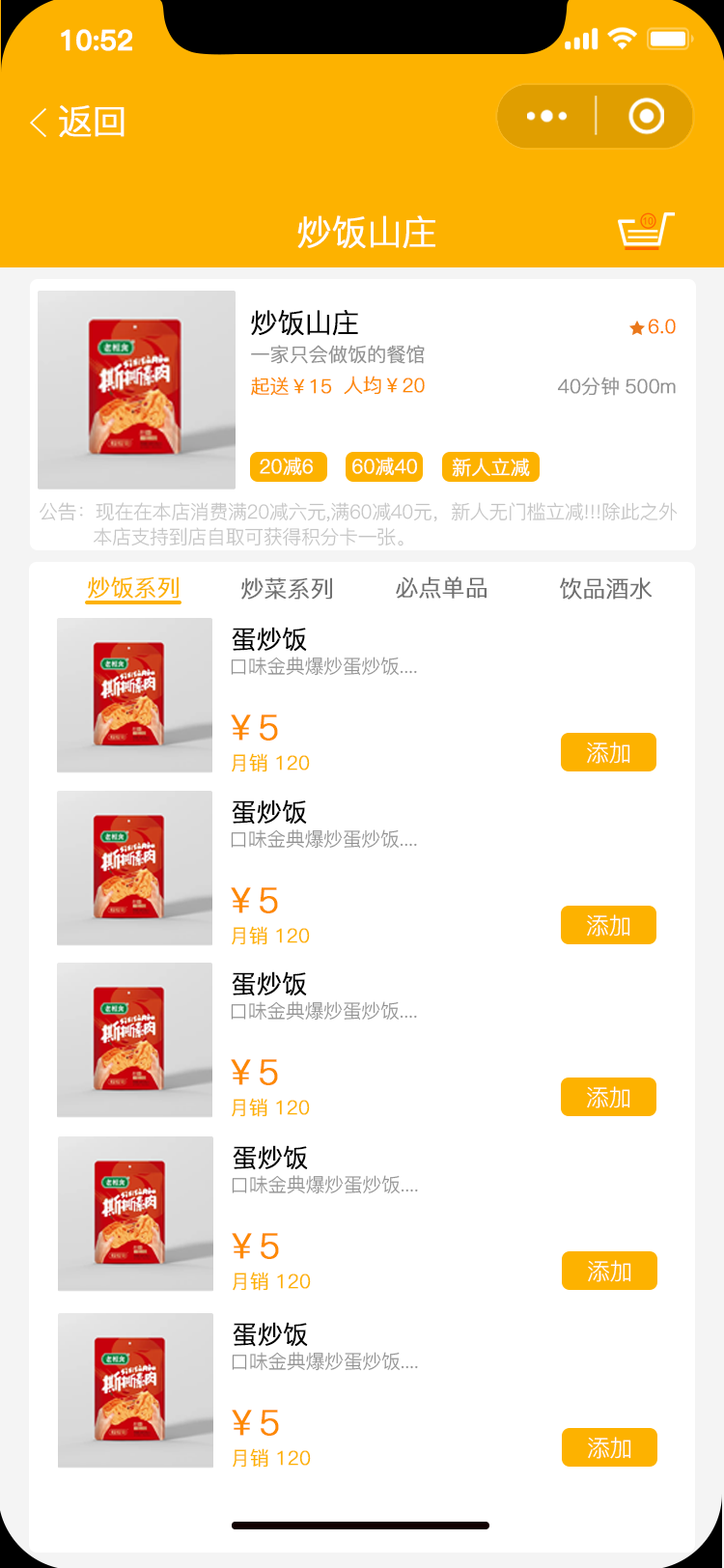
<style>
.page{position:relative;width:724px;height:1568px;background:#ffffff}
.page>*{position:absolute;margin:0}
.t1{font:27.5px "PingFang-SC-Bold";letter-spacing:-0.02em;color:#ffffff;font-weight:bold}
.t2{font:34.8px "PingFang-SC-Regular";letter-spacing:-0.02em;color:#ffffff;font-weight:bold}
.t3{font:27px "PingFang-SC-Regular";letter-spacing:-0.02em;color:#000000;font-weight:bold}
.t4{font:19.3px "PingFang-SC-Regular";letter-spacing:-0.02em;color:#ff7900;font-weight:bold}
.t5{font:19.3px "PingFang-SC-Regular";letter-spacing:-0.02em;color:#919191;font-weight:bold}
.t6{font:19.3px "PingFang-SC-Regular";letter-spacing:-0.02em;color:#fd8900;font-weight:bold}
.t7{font:19.3px "PingFang-SC-Regular";letter-spacing:-0.02em;color:#fefefe;font-weight:bold}
.t8{font:19.3px "PingFang-SC-Regular";letter-spacing:-0.02em;color:#ffffff;font-weight:bold}
.t9{font:19.3px/25.1px "PingFang-SC-Regular";letter-spacing:-0.02em;color:#c4c4c4}
.t10{font:23.2px "PingFang-SC-Regular";letter-spacing:-0.02em;color:#fdb200;font-weight:bold}
.t11{font:23.2px "PingFang-SC-Regular";letter-spacing:-0.02em;color:#707070;font-weight:bold}
.t12{font:25.1px "PingFang-SC-Regular";letter-spacing:-0.02em;color:#000000;font-weight:bold}
.t13{font:19.3px "PingFang-SC-Regular";letter-spacing:-0.02em;color:#919191}
.t14{font:34.8px "PingFang-SC-Regular";letter-spacing:-0.02em;color:#fd8900;font-weight:bold}
.t15{font:23.2px "PingFang-SC-Regular";letter-spacing:-0.02em;color:#ffffff}
.t16{font:19.3px "PingFang-SC-Regular";letter-spacing:-0.02em;color:#fdb200;font-weight:bold}
</style>
<div class="page">
<p class="t1" style="left:61px;top:29px;width:71px;height:22px">10:52</p>
<p class="t2" style="left:59px;top:105px;width:66px;height:32px">返回</p>
<p class="t2" style="left:297px;top:215px;width:138px;height:33px">炒饭山庄</p>
<p class="t3" style="left:251px;top:310px;width:107px;height:26px">炒饭山庄</p>
<p class="t4" style="left:648px;top:319px;width:28px;height:15px">6.0</p>
<p class="t5" style="left:251px;top:345px;width:174px;height:19px">一家只会做饭的餐馆</p>
<p class="t6" style="left:251px;top:377px;width:81px;height:19px">起送￥15</p>
<p class="t6" style="left:344px;top:376px;width:81px;height:19px">人均￥20</p>
<p class="t5" style="left:557px;top:377px;width:62px;height:19px">40分钟</p>
<p class="t5" style="left:626px;top:378px;width:50px;height:16px">500m</p>
<p class="t7" style="left:260px;top:457px;width:53px;height:19px">20减6</p>
<p class="t8" style="left:352px;top:457px;width:65px;height:19px">60减40</p>
<p class="t8" style="left:452px;top:458px;width:78px;height:19px">新人立减</p>
<p class="t9" style="left:40px;top:502px;width:638px;height:44px">公告：现在在本店消费满20减六元,满60减40元，新人无门槛立减!!!除此之外<br>         本店支持到店自取可获得积分卡一张。</p>
<p class="t10" style="left:88px;top:576px;width:91px;height:23px">炒饭系列</p>
<p class="t11" style="left:241px;top:577px;width:91px;height:23px">炒菜系列</p>
<p class="t11" style="left:396px;top:576px;width:91px;height:23px">必点单品</p>
<p class="t11" style="left:560px;top:577px;width:93px;height:23px">饮品酒水</p>
<p class="t12" style="left:232px;top:627px;width:75px;height:25px">蛋炒饭</p>
<p class="t13" style="left:231px;top:657px;width:186px;height:19px">口味金典爆炒蛋炒饭....</p>
<p class="t14" style="left:231px;top:714px;width:47px;height:27px">￥5</p>
<p class="t15" style="left:587px;top:742px;width:43px;height:22px">添加</p>
<p class="t16" style="left:232px;top:753px;width:78px;height:19px">月销 120</p>
<p class="t12" style="left:232px;top:799px;width:75px;height:26px">蛋炒饭</p>
<p class="t13" style="left:231px;top:829px;width:186px;height:20px">口味金典爆炒蛋炒饭....</p>
<p class="t14" style="left:231px;top:887px;width:47px;height:26px">￥5</p>
<p class="t15" style="left:587px;top:914px;width:43px;height:23px">添加</p>
<p class="t16" style="left:232px;top:926px;width:78px;height:19px">月销 120</p>
<p class="t12" style="left:232px;top:971px;width:75px;height:25px">蛋炒饭</p>
<p class="t13" style="left:231px;top:1001px;width:186px;height:20px">口味金典爆炒蛋炒饭....</p>
<p class="t14" style="left:231px;top:1059px;width:47px;height:26px">￥5</p>
<p class="t16" style="left:232px;top:1098px;width:78px;height:19px">月销 120</p>
<p class="t15" style="left:587px;top:1086px;width:43px;height:22px">添加</p>
<p class="t12" style="left:233px;top:1145px;width:75px;height:25px">蛋炒饭</p>
<p class="t13" style="left:232px;top:1175px;width:186px;height:19px">口味金典爆炒蛋炒饭....</p>
<p class="t14" style="left:232px;top:1233px;width:47px;height:26px">￥5</p>
<p class="t15" style="left:588px;top:1260px;width:43px;height:22px">添加</p>
<p class="t16" style="left:233px;top:1272px;width:78px;height:19px">月销 120</p>
<p class="t12" style="left:233px;top:1322px;width:75px;height:25px">蛋炒饭</p>
<p class="t13" style="left:232px;top:1352px;width:186px;height:19px">口味金典爆炒蛋炒饭....</p>
<p class="t14" style="left:232px;top:1410px;width:47px;height:26px">￥5</p>
<p class="t15" style="left:588px;top:1437px;width:43px;height:22px">添加</p>
<p class="t16" style="left:233px;top:1448px;width:78px;height:20px">月销 120</p>
</div>
